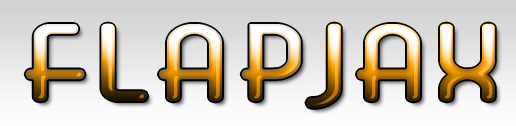
<style>
.page{position:relative;width:516px;height:126px}
.page>*{position:absolute;margin:0}
.t1{font:100px "BeautySchoolDropoutII";letter-spacing:0.1em;scale:1.4 1}
</style>
<div class="page">
<p class="t1" style="left:26px;top:24px;width:121px;height:77px">FL</p>
<p class="t1" style="left:307px;top:24px;width:187px;height:83px">JAX</p>
</div>
